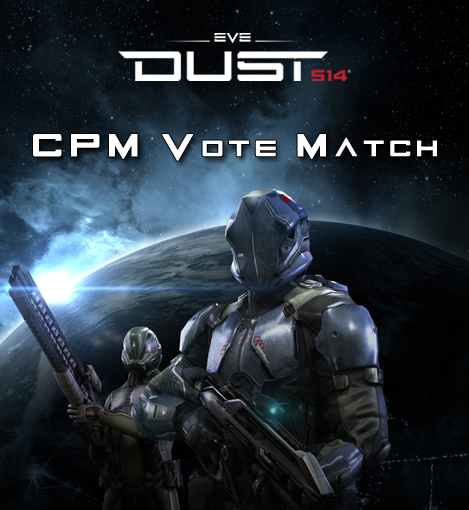
<style>
.page{position:relative;width:469px;height:510px}
.page>*{position:absolute;margin:0}
.t1{font:30px "EVEAlpha-Bold";letter-spacing:0.2em;color:#ffffff;font-variant:small-caps;font-weight:bold}
</style>
<div class="page">
<p class="t1" style="left:33px;top:134px;width:404px;height:27px">CPM Vote Match</p>
</div>
